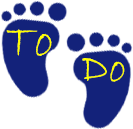
<style>
.page{position:relative;width:133px;height:129px;background:#ffffff}
.page>*{position:absolute;margin:0}
.t1{font:47.5px "BradleyHandITC";color:#ffff00}
.t2{font:43px "BradleyHandITC";color:#ffff00}
</style>
<div class="page">
<p class="t1" style="left:6px;top:29px;width:46px;height:27px">To</p>
<p class="t2" style="left:82px;top:58px;width:43px;height:24px">Do</p>
</div>
